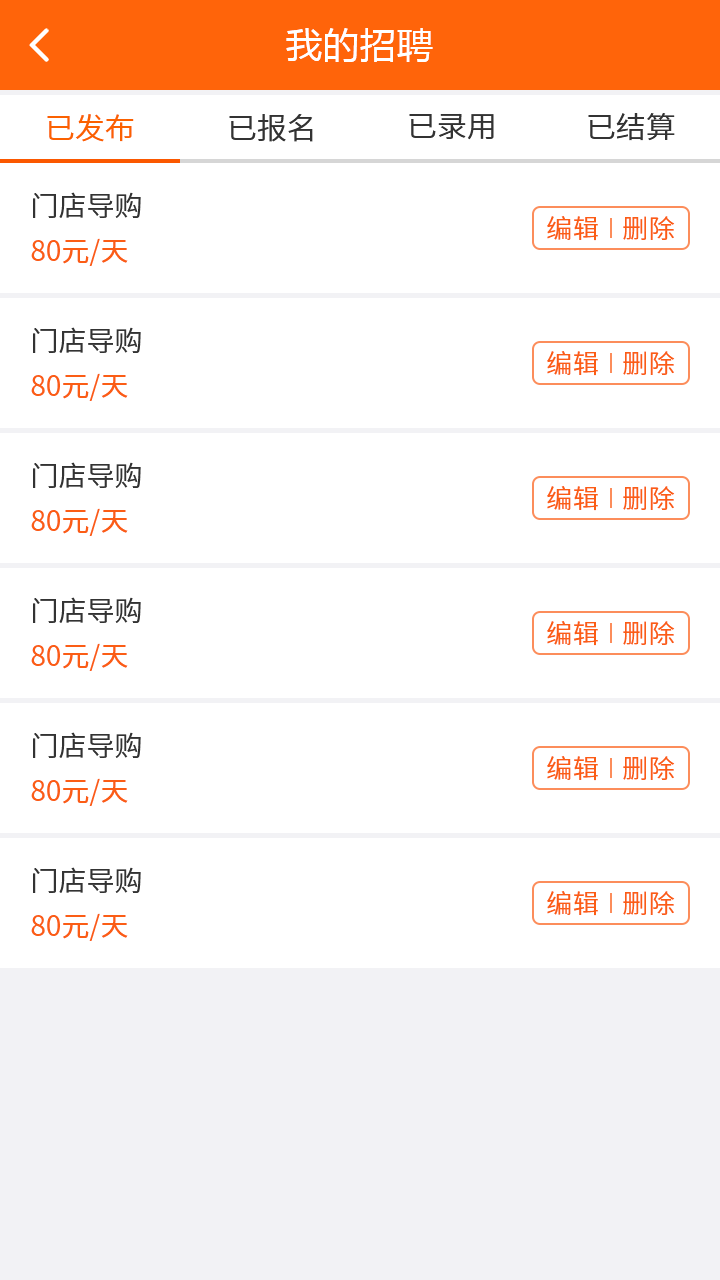
<style>
.page{position:relative;width:720px;height:1280px;background:#ffffff}
.page>*{position:absolute;margin:0}
.t1{font:36px "MicrosoftYaHei";letter-spacing:0.03em;color:#ffffff}
.t2{font:30px "NotoSansCJKsc-DemiLight";color:#333333;font-variant:small-caps}
.t3{font:30px "NotoSansCJKsc-DemiLight";color:#fb6100;font-variant:small-caps}
.t4{font:28px "NotoSansCJKsc-DemiLight";color:#333333;font-variant:small-caps}
.t5{font:26px "NotoSansCJKsc-DemiLight";letter-spacing:0.03em;color:#fb5d15;font-variant:small-caps}
.t6{font:28px "NotoSansCJKsc-Regular";color:#fb5d15;font-variant:small-caps}
</style>
<div class="page">
<p class="t1" style="left:286px;top:28px;width:147px;height:34px">我的招聘</p>
<p class="t2" style="left:409px;top:113px;width:85px;height:27px">已录用</p>
<p class="t2" style="left:588px;top:113px;width:87px;height:28px">已结算</p>
<p class="t3" style="left:47px;top:114px;width:87px;height:28px">已发布</p>
<p class="t2" style="left:229px;top:114px;width:84px;height:28px">已报名</p>
<p class="t4" style="left:33px;top:192px;width:108px;height:26px">门店导购</p>
<p class="t5" style="left:547px;top:216px;width:51px;height:25px">编辑</p>
<p class="t5" style="left:623px;top:216px;width:52px;height:24px">删除</p>
<p class="t6" style="left:31px;top:238px;width:97px;height:28px">80元/天</p>
<p class="t4" style="left:33px;top:327px;width:108px;height:26px">门店导购</p>
<p class="t5" style="left:547px;top:351px;width:51px;height:25px">编辑</p>
<p class="t5" style="left:623px;top:351px;width:52px;height:24px">删除</p>
<p class="t6" style="left:31px;top:373px;width:97px;height:28px">80元/天</p>
<p class="t4" style="left:33px;top:462px;width:108px;height:26px">门店导购</p>
<p class="t5" style="left:547px;top:486px;width:51px;height:25px">编辑</p>
<p class="t5" style="left:623px;top:486px;width:52px;height:24px">删除</p>
<p class="t6" style="left:31px;top:508px;width:97px;height:28px">80元/天</p>
<p class="t4" style="left:33px;top:597px;width:108px;height:26px">门店导购</p>
<p class="t5" style="left:547px;top:621px;width:51px;height:25px">编辑</p>
<p class="t5" style="left:623px;top:621px;width:52px;height:24px">删除</p>
<p class="t6" style="left:31px;top:643px;width:97px;height:28px">80元/天</p>
<p class="t4" style="left:33px;top:732px;width:108px;height:26px">门店导购</p>
<p class="t5" style="left:547px;top:756px;width:51px;height:25px">编辑</p>
<p class="t5" style="left:623px;top:756px;width:52px;height:24px">删除</p>
<p class="t6" style="left:31px;top:778px;width:97px;height:28px">80元/天</p>
<p class="t4" style="left:33px;top:867px;width:108px;height:26px">门店导购</p>
<p class="t5" style="left:547px;top:891px;width:51px;height:25px">编辑</p>
<p class="t5" style="left:623px;top:891px;width:52px;height:24px">删除</p>
<p class="t6" style="left:31px;top:913px;width:97px;height:28px">80元/天</p>
</div>
